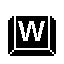
<style>
.page{position:relative;width:64px;height:64px;background:#ffffff}
.page>*{position:absolute;margin:0}
.t1{font:28px "Arial-BoldMT";color:#ffffff}
</style>
<div class="page">
<p class="t1" style="left:18px;top:21px;width:27px;height:20px">W</p>
</div>
